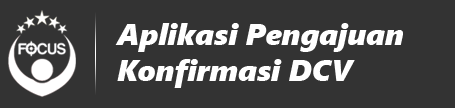
<style>
.page{position:relative;width:455px;height:108px;background:#333333}
.page>*{position:absolute;margin:0}
.t1{font:30px "SegoeUIBlack-Italic";color:#ffffff}
</style>
<div class="page">
<p class="t1" style="left:115px;top:23px;width:288px;height:65px">Aplikasi Pengajuan<br>Konfirmasi DCV</p>
</div>
